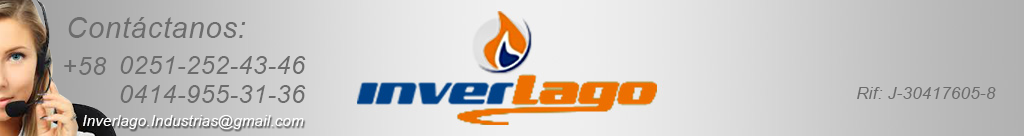
<style>
.page{position:relative;width:1024px;height:136px}
.page>*{position:absolute;margin:0}
.t1{font:29.2px "Arial-ItalicMT";letter-spacing:0.024em;color:#6c6c6c}
.t2{font:25px "Arial-ItalicMT";letter-spacing:0.024em;color:#6c6c6c}
.t3{font:16.7px "Arial-ItalicMT";letter-spacing:0.024em;color:#6c6c6c}
.t4{font:14.7px "Arial-ItalicMT";letter-spacing:0.024em;color:#ffffff}
</style>
<div class="page">
<p class="t1" style="left:68px;top:17px;width:178px;height:21px">Contáctanos:</p>
<p class="t2" style="left:64px;top:57px;width:43px;height:18px">+58</p>
<p class="t2" style="left:120px;top:56px;width:186px;height:18px">0251-252-43-46</p>
<p class="t2" style="left:120px;top:85px;width:186px;height:18px">0414-955-31-36</p>
<p class="t3" style="left:857px;top:87px;width:139px;height:12px">Rif: J-30417605-8</p>
<p class="t4" style="left:83px;top:115px;width:221px;height:14px">Inverlago.Industrias@gmail.com</p>
</div>
